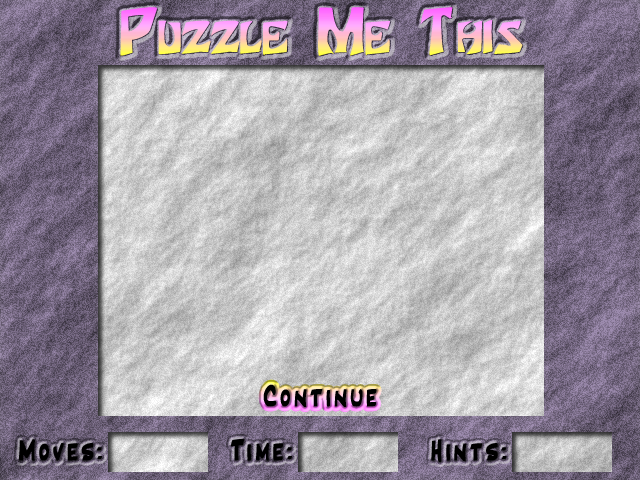
<style>
.page{position:relative;width:640px;height:480px}
.page>*{position:absolute;margin:0}
.t1{font:54px "Houters-Normal";font-variant:small-caps;font-weight:bold}
.t2{font:30px "Inkpen2Script";letter-spacing:0.1em;color:#000000;font-weight:bold}
</style>
<div class="page">
<p class="t1" style="left:120px;top:7px;width:403px;height:49px">Puzzle Me This</p>
<p class="t2" style="left:263px;top:384px;width:114px;height:23px">Continue</p>
<p class="t2" style="left:19px;top:439px;width:83px;height:22px">Moves:</p>
<p class="t2" style="left:231px;top:439px;width:61px;height:22px">Time:</p>
<p class="t2" style="left:431px;top:439px;width:76px;height:23px">Hints:</p>
</div>
